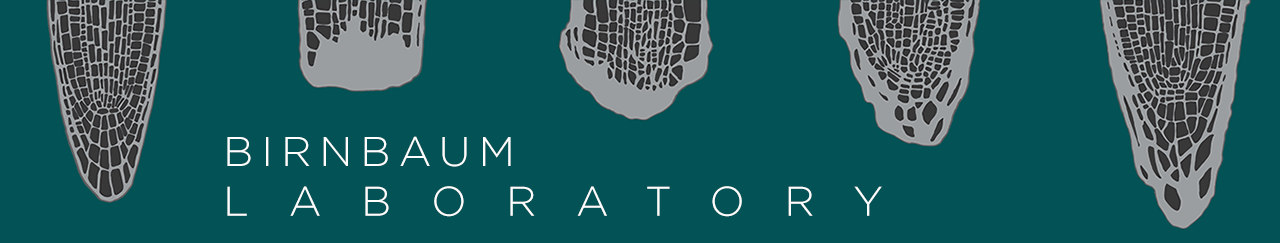
<style>
.page{position:relative;width:1280px;height:243px;background:#035356}
.page>*{position:absolute;margin:0}
.t1{font:41.5px "Gotham-Light";letter-spacing:0.96em;color:#ffffff}
.t2{font:41.5px "Gotham-Light";letter-spacing:0.2em;color:#ffffff}
</style>
<div class="page">
<p class="t1" style="left:227px;top:136px;width:655px;height:81px"><span class="t2">BIRNBAUM <br></span>LABORATORY</p>
</div>
